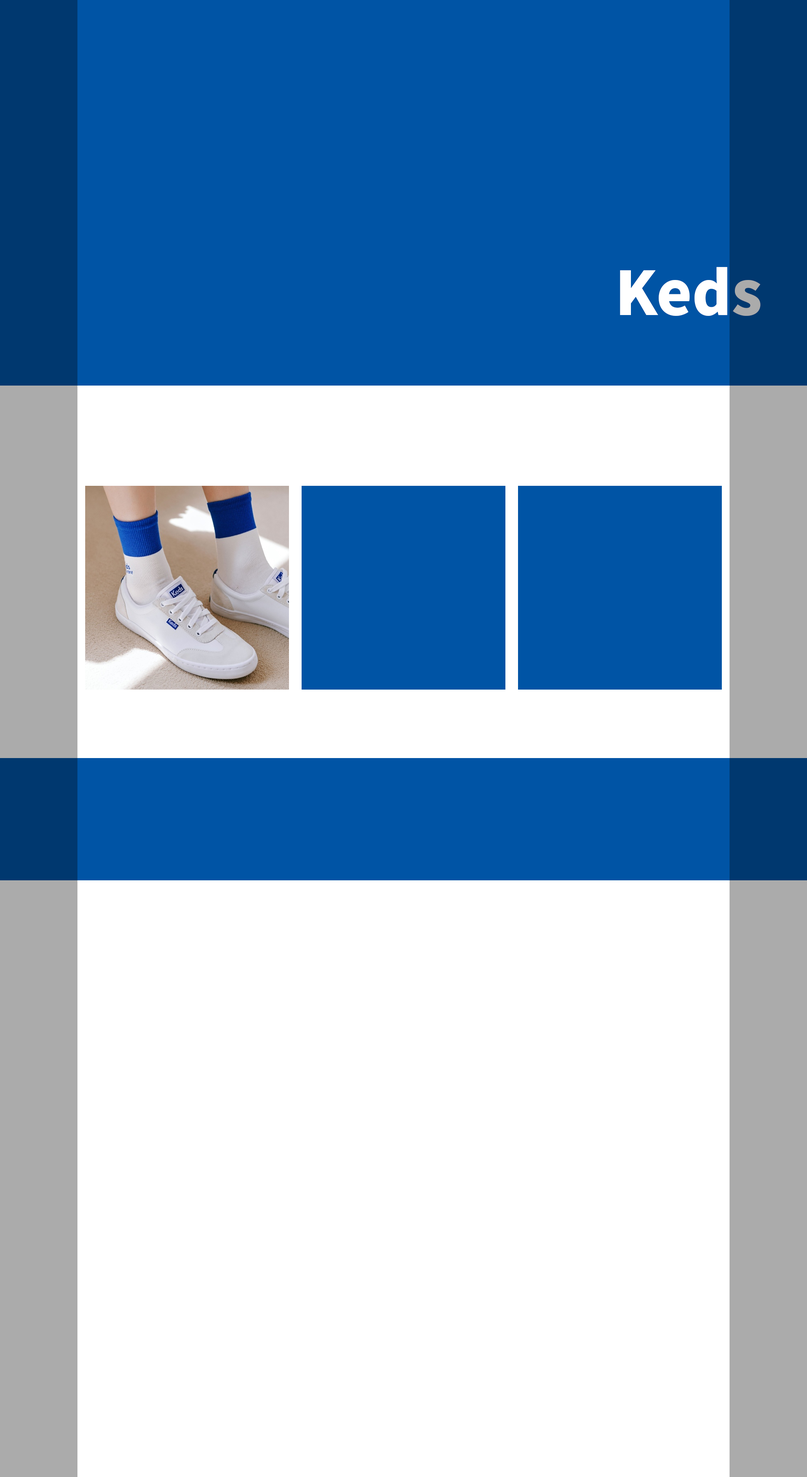
<style>
.page{position:relative;width:807px;height:1477px;background:#ffffff}
.page>*{position:absolute;margin:0}
.t1{font:60.1px "NotoSansKR-Black";color:#ffffff}
</style>
<div class="page">
<p class="t1" style="left:620px;top:267px;width:141px;height:49px">Keds</p>
</div>
